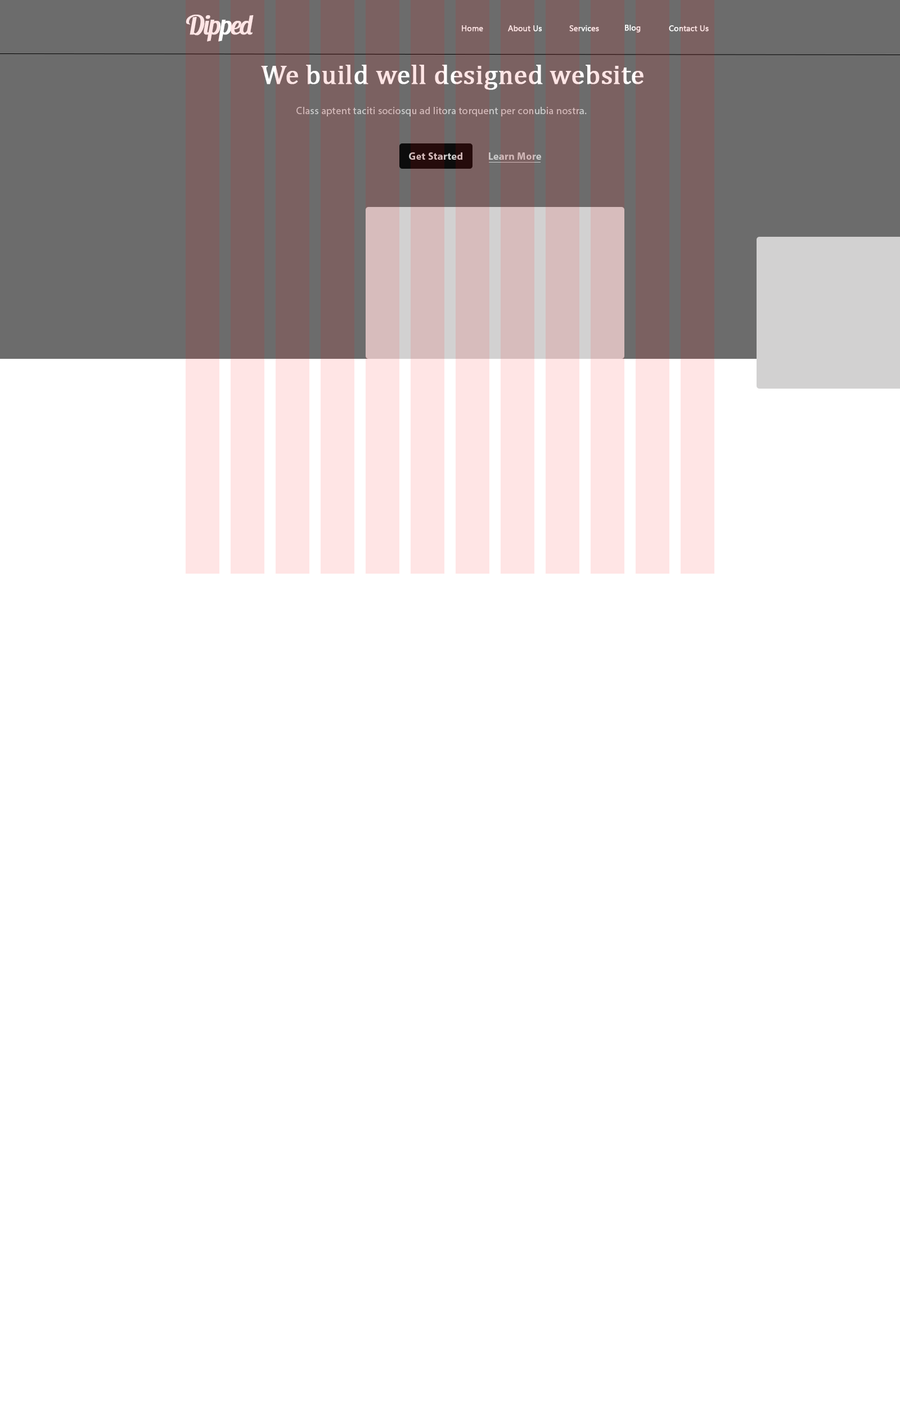
<style>
.page{position:relative;width:900px;height:1406px;background:#ffffff}
.page>*{position:absolute;margin:0}
.t1{font:27px "LobsterTwo";letter-spacing:-0.05em;color:#ffe5e5;font-weight:bold;font-style:italic}
.t2{font:7.9px "KhmerUI";color:#ffe5e5;font-weight:bold}
.t3{font:7.9px "KhmerUI";font-weight:bold}
.t4{font:7.9px "KhmerUI";color:#ffffff;font-weight:bold}
.t5{font:27px "Cambria";font-weight:bold}
.t6{font:10.1px "MyriadPro-Regular";letter-spacing:0.025em;color:#cccccc}
.t7{font:10.1px "MyriadPro-Bold";letter-spacing:0.025em;color:#cccccc}
</style>
<div class="page">
<p class="t1" style="left:186px;top:15px;width:68px;height:27px">Dipped</p>
<p class="t2" style="left:462px;top:25px;width:21px;height:7px">Home</p>
<p class="t2" style="left:508px;top:25px;width:34px;height:7px">About Us</p>
<p class="t3" style="left:569px;top:25px;width:30px;height:7px">Services</p>
<p class="t4" style="left:625px;top:25px;width:16px;height:8px">Blog</p>
<p class="t3" style="left:669px;top:25px;width:40px;height:7px">Contact Us</p>
<p class="t5" style="left:261px;top:65px;width:383px;height:25px">We build well designed website</p>
<p class="t6" style="left:296px;top:107px;width:291px;height:9px">Class aptent taciti sociosqu ad litora torquent per conubia nostra.</p>
<p class="t7" style="left:409px;top:152px;width:53px;height:8px">Get Started</p>
<p class="t7" style="left:489px;top:152px;width:52px;height:8px">Learn More</p>
</div>
